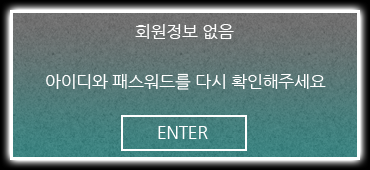
<style>
.page{position:relative;width:370px;height:170px}
.page>*{position:absolute;margin:0}
.t1{font:16.7px "NanumGothic";color:#ffffff}
</style>
<div class="page">
<p class="t1" style="left:135px;top:24px;width:99px;height:15px">회원정보 없음</p>
<p class="t1" style="left:46px;top:73px;width:280px;height:17px">아이디와 패스워드를 다시 확인해주세요</p>
</div>
